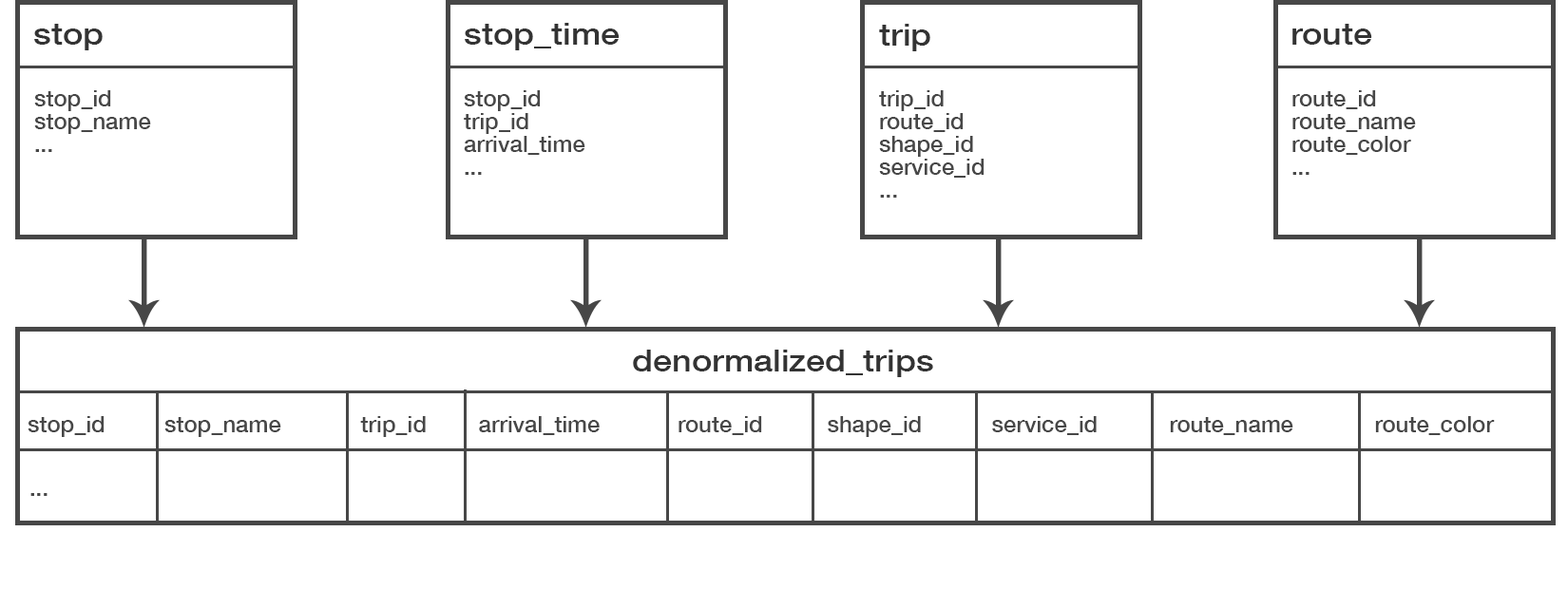
<style>
.page{position:relative;width:1568px;height:608px;background:#ffffff}
.page>*{position:absolute;margin:0}
.t1{font:30.8px "HelveticaNeue-Medium";color:#333333;scale:1.11 1}
.t2{font:22.8px/22.8px "HelveticaNeue-Medium";color:#474747}
.t3{font:22.8px "HelveticaNeue-Medium";color:#474747}
</style>
<div class="page">
<p class="t1" style="left:34px;top:24px;width:69px;height:26px">stop</p>
<p class="t1" style="left:465px;top:23px;width:155px;height:27px">stop_time</p>
<p class="t1" style="left:879px;top:24px;width:51px;height:27px">trip</p>
<p class="t1" style="left:1292px;top:24px;width:80px;height:21px">route</p>
<p class="t2" style="left:34px;top:90px;width:117px;height:62px">stop_id<br> stop_name<br> ...</p>
<p class="t2" style="left:464px;top:90px;width:121px;height:85px">stop_id<br> trip_id<br> arrival_time<br> ...</p>
<p class="t2" style="left:879px;top:90px;width:106px;height:108px">trip_id<br> route_id<br> shape_id<br> service_id<br> ...</p>
<p class="t2" style="left:1292px;top:90px;width:124px;height:85px">route_id<br> route_name<br> route_color<br> ...</p>
<p class="t1" style="left:633px;top:350px;width:300px;height:27px">denormalized_trips</p>
<p class="t3" style="left:28px;top:416px;width:1467px;height:21px">stop_id    stop_name        trip_id    arrival_time    route_id      shape_id     service_id      route_name      route_color</p>
<p class="t3" style="left:30px;top:493px;width:18px;height:3px">...</p>
</div>
